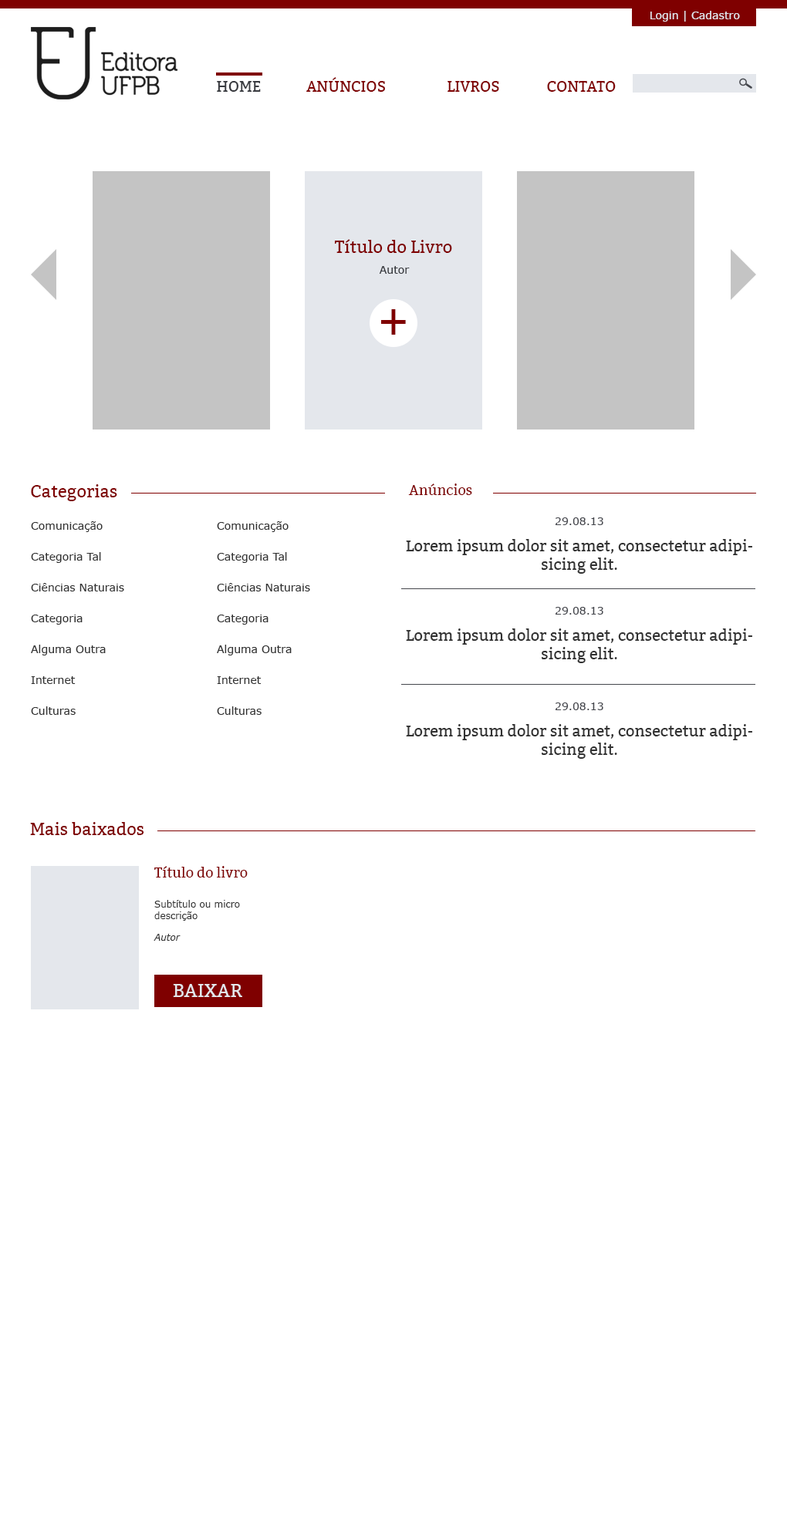
<style>
.page{position:relative;width:787px;height:1516px;background:#ffffff}
.page>*{position:absolute;margin:0}
.t1{font:10.8px "Verdana";color:#e4e7ec}
.t2{font:14.7px "Bitter-Regular";color:#7f0000}
.t3{font:14.7px "Bitter-Regular";color:#393b40}
.t4{font:17px "Bitter-Regular";color:#7f0000}
.t5{font:10.8px "Verdana";color:#393b40}
.t6{font:47px "Bitter-Regular";color:#7f0000}
.t7{font:13.9px "Bitter-Regular";color:#7f0000}
.t8{font:10.8px/30.8px "Verdana";color:#323232}
.t9{font:10.8px "Verdana";color:#45474d}
.t10{font:15.4px "Bitter-Regular";color:#323232}
.t11{font:9.3px "Verdana";color:#323232}
.t12{font:9.3px "Verdana-Italic";color:#323232}
.t13{font:18.5px "Bitter-Regular";color:#e4e7ec}
</style>
<div class="page">
<p class="t1" style="left:650px;top:11px;width:90px;height:11px">Login | Cadastro</p>
<p class="t2" style="left:306px;top:77px;width:79px;height:15px">ANÚNCIOS</p>
<p class="t3" style="left:217px;top:81px;width:44px;height:11px">HOME</p>
<p class="t2" style="left:447px;top:81px;width:52px;height:11px">LIVROS</p>
<p class="t2" style="left:547px;top:81px;width:68px;height:11px">CONTATO</p>
<p class="t4" style="left:335px;top:239px;width:117px;height:14px">Título do Livro</p>
<p class="t5" style="left:379px;top:266px;width:30px;height:8px">Autor</p>
<p class="t6" style="left:381px;top:309px;width:25px;height:26px">+</p>
<p class="t4" style="left:31px;top:484px;width:86px;height:17px">Categorias</p>
<p class="t7" style="left:408px;top:483px;width:64px;height:12px">Anúncios</p>
<p class="t8" style="left:31px;top:521px;width:93px;height:194px">Comunicação <br>Categoria Tal<br>Ciências Naturais<br>Categoria<br>Alguma Outra<br>Internet<br>Culturas</p>
<p class="t8" style="left:217px;top:521px;width:93px;height:194px">Comunicação <br>Categoria Tal<br>Ciências Naturais<br>Categoria<br>Alguma Outra<br>Internet<br>Culturas</p>
<p class="t9" style="left:555px;top:517px;width:48px;height:8px">29.08.13</p>
<p class="t10" style="left:406px;top:539px;width:346px;height:35px;text-align:center">Lorem ipsum dolor sit amet, consectetur adipisicing elit.</p>
<p class="t9" style="left:555px;top:607px;width:48px;height:8px">29.08.13</p>
<p class="t10" style="left:406px;top:628px;width:346px;height:35px;text-align:center">Lorem ipsum dolor sit amet, consectetur adipisicing elit.</p>
<p class="t9" style="left:555px;top:702px;width:48px;height:8px">29.08.13</p>
<p class="t10" style="left:406px;top:724px;width:346px;height:35px;text-align:center">Lorem ipsum dolor sit amet, consectetur adipisicing elit.</p>
<p class="t4" style="left:30px;top:822px;width:114px;height:13px">Mais baixados</p>
<p class="t7" style="left:154px;top:866px;width:94px;height:12px">Título do livro</p>
<p class="t11" style="left:153px;top:900px;width:87px;height:41px">Subtítulo ou micro descrição<br><br><span class="t12">Autor</span></p>
<p class="t13" style="left:173px;top:984px;width:69px;height:13px">BAIXAR</p>
</div>
